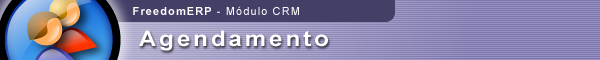
<style>
.page{position:relative;width:600px;height:60px}
.page>*{position:absolute;margin:0}
.t1{font:11px "ArialMT";letter-spacing:0.1em;color:#ffffff}
.t2{font:11px "Arial-BoldMT";letter-spacing:0.1em;color:#ffffff}
.t3{font:21.6px "Arial-BoldMT";letter-spacing:0.125em;color:#ffffff;scale:1.11 1}
</style>
<div class="page">
<p class="t1" style="left:133px;top:6px;width:166px;height:9px"><span class="t2">FreedomERP</span> - Módulo CRM</p>
<p class="t3" style="left:139px;top:30px;width:189px;height:21px">Agendamento</p>
</div>
